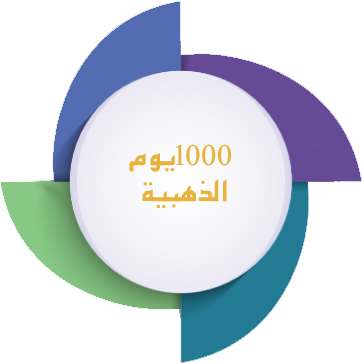
<style>
.page{position:relative;width:362px;height:363px;background:#ffffff}
.page>*{position:absolute;margin:0}
.t1{font:48px/36px "AF_Quseem-NormalTraditional";color:#e8b33c}
.t2{font:30px/36px "AF_Quseem-NormalTraditional";color:#e8b33c}
</style>
<div class="page">
<p class="t1" style="left:129px;top:144px;width:102px;height:65px;text-align:center"><span class="t2">1000</span> يوم<br>الذهبية</p>
</div>
